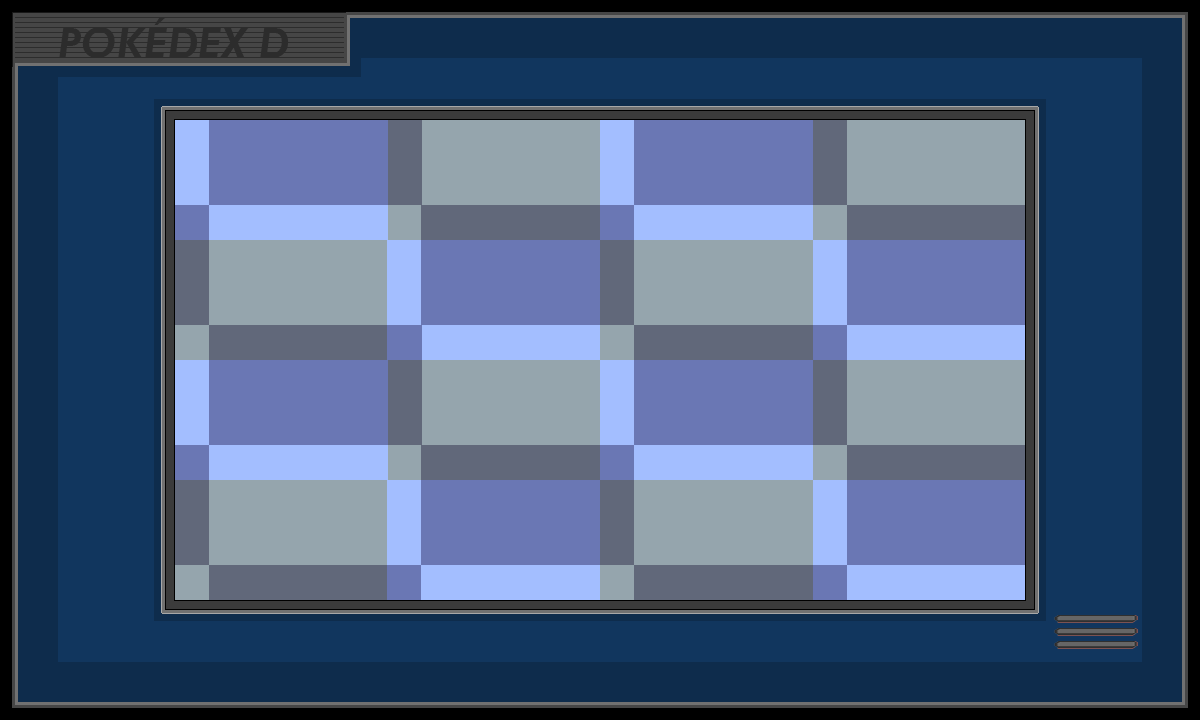
<style>
.page{position:relative;width:1200px;height:720px;background:#11365e}
.page>*{position:absolute;margin:0}
.t1{font:41.7px "FuturaBT-HeavyItalic";color:#2c2c2c}
</style>
<div class="page">
<p class="t1" style="left:59px;top:18px;width:230px;height:40px">POKÉDEX D</p>
</div>
